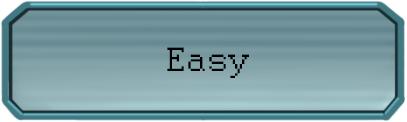
<style>
.page{position:relative;width:407px;height:122px}
.page>*{position:absolute;margin:0}
.t1{font:37.5px "Courier";color:#000000}
</style>
<div class="page">
<p class="t1" style="left:167px;top:47px;width:82px;height:31px">Easy</p>
</div>
